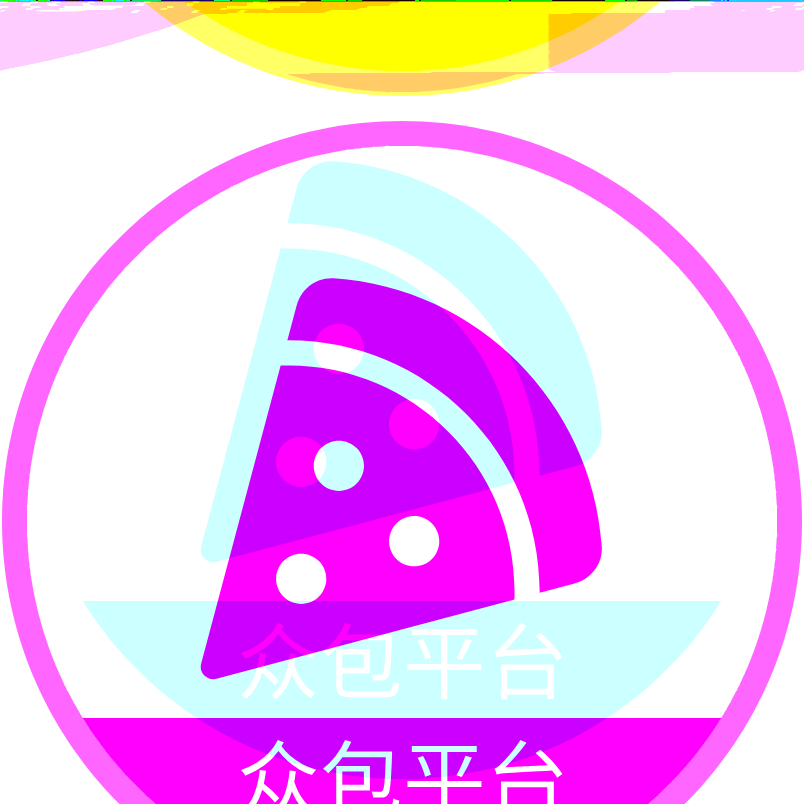
<style>
.page{position:relative;width:804px;height:804px;background:#ffffff}
.page>*{position:absolute;margin:0}
.t1{font:83.1px "MicrosoftYaHei";color:#ffffff}
</style>
<div class="page">
<p class="t1" style="left:240px;top:620px;width:323px;height:78px">众包平台</p>
</div>
